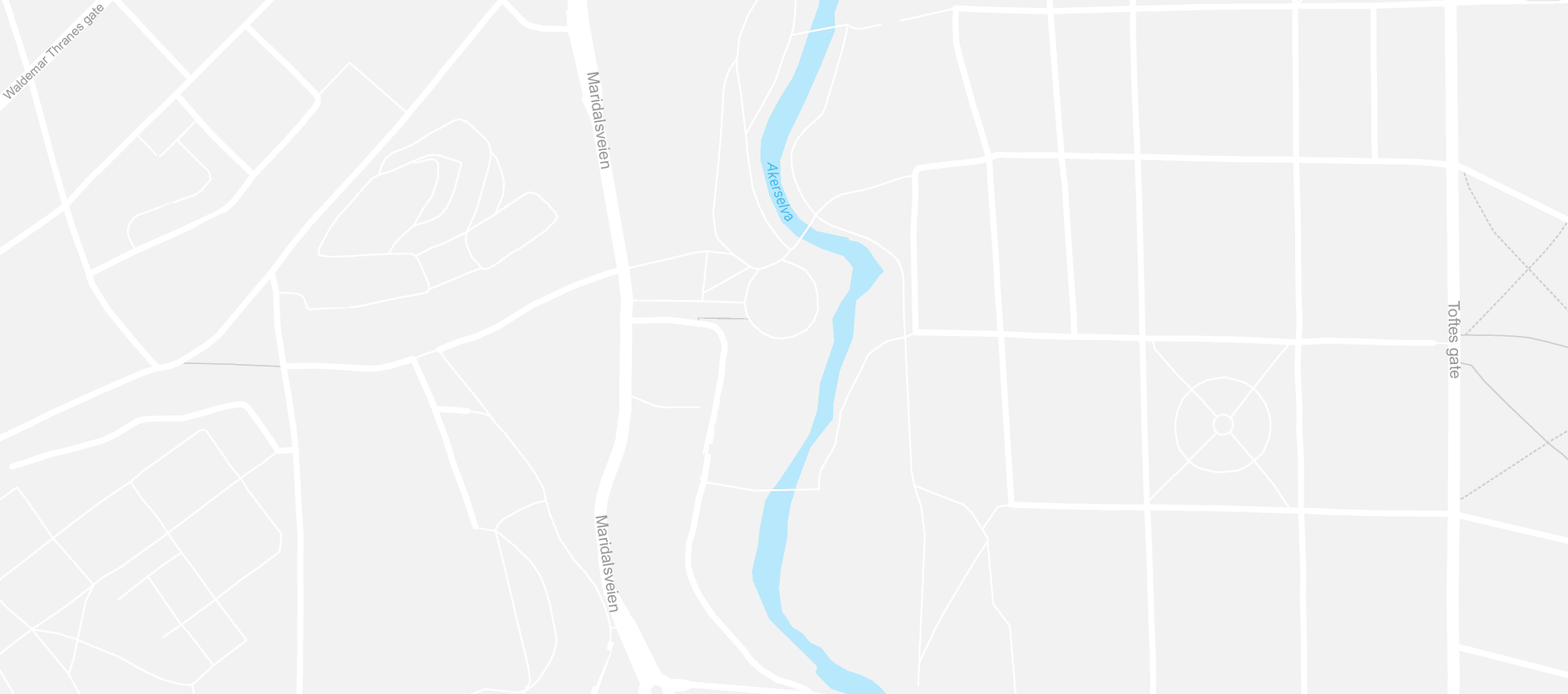
<style>
.page{position:relative;width:1568px;height:694px;background:#f2f2f2}
.page>*{position:absolute;margin:0}
.t1{font:12.5px "ArialMT";color:#979797}
.t2{font:15.9px "ArialMT";color:#979797}
</style>
<div class="page">
<p class="t1" style="left:3px;top:4px;width:101px;height:95px;rotate:-44deg">Waldemar Thranes gate</p>
<p class="t2" style="left:587px;top:72px;width:23px;height:98px;rotate:82deg">Maridalsveien</p>
<p class="t2" style="left:1446px;top:300px;width:15px;height:79px;rotate:88deg">Toftes gate</p>
<p class="t2" style="left:595px;top:515px;width:24px;height:98px;rotate:82deg">Maridalsveien</p>
</div>
